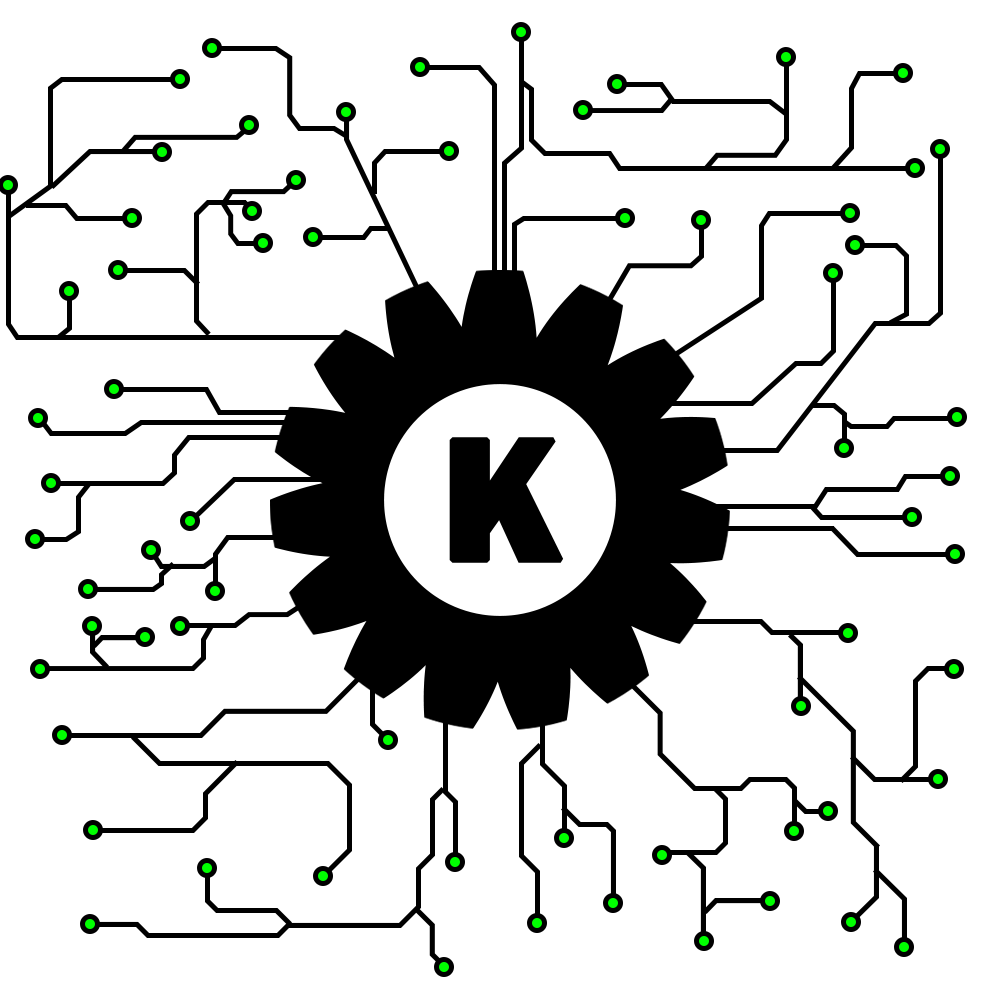
<style>
.page{position:relative;width:1000px;height:1000px;background:#ffffff}
.page>*{position:absolute;margin:0}
.t1{font:180.4px "FranklinGothic-Heavy";color:#000000;font-weight:bold}
</style>
<div class="page">
<p class="t1" style="left:449px;top:437px;width:115px;height:126px">K</p>
</div>
